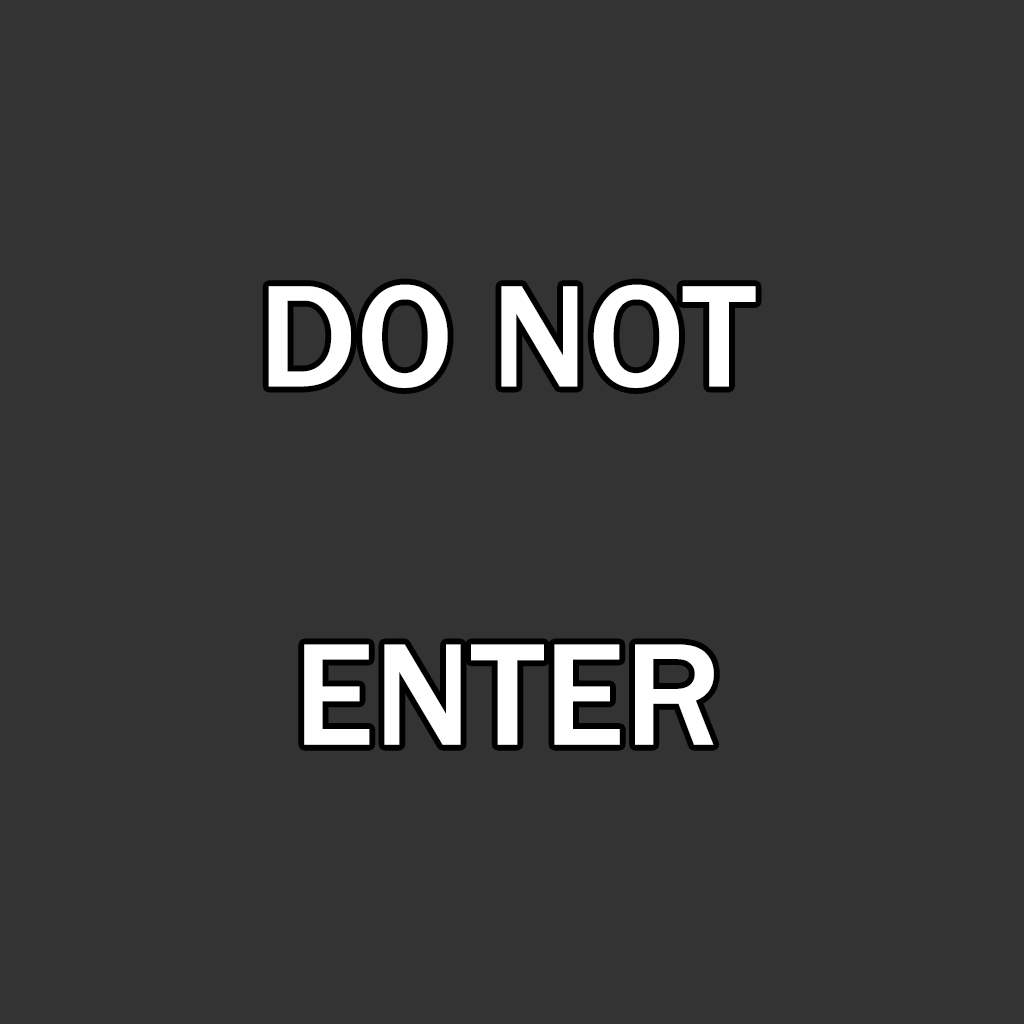
<style>
.page{position:relative;width:1024px;height:1024px;background:#333333}
.page>*{position:absolute;margin:0}
.t1{font:150px/179.2px "FranklinGothic-Medium";color:#ffffff}
</style>
<div class="page">
<p class="t1" style="left:268px;top:284px;width:488px;height:461px;text-align:center">DO NOT<br><br>ENTER</p>
</div>
